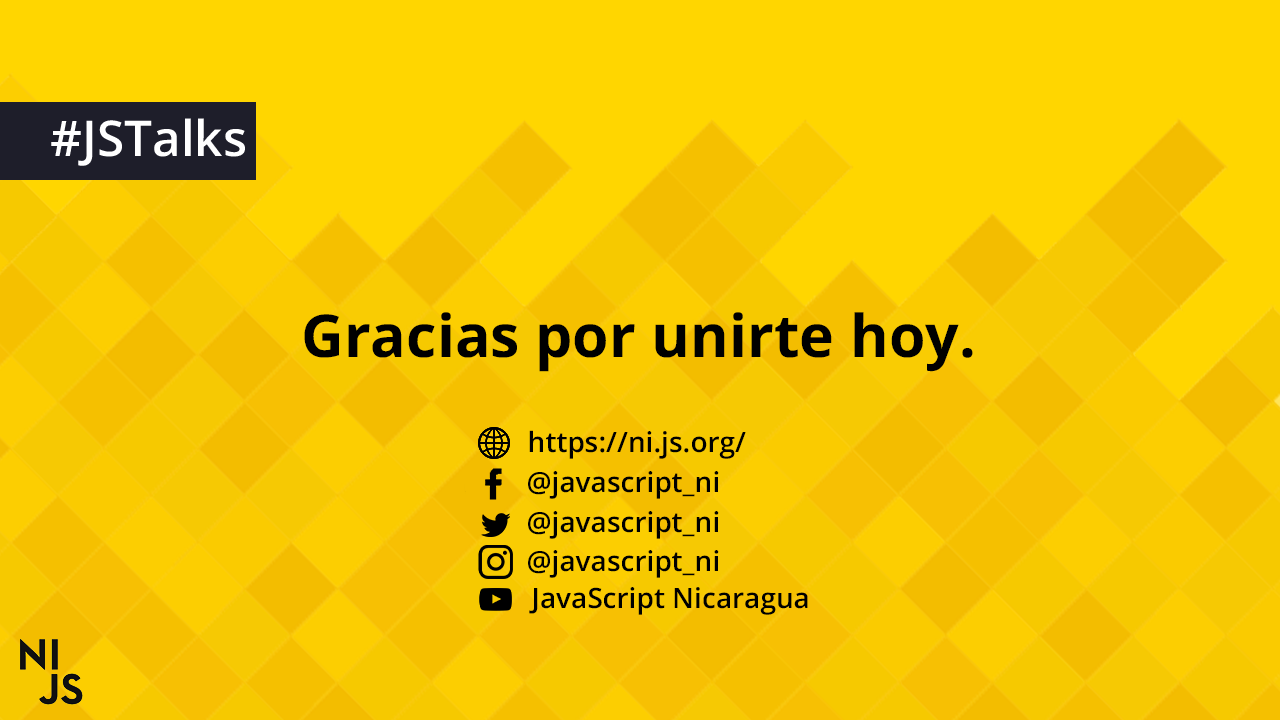
<style>
.page{position:relative;width:1280px;height:720px;background:#ffd600}
.page>*{position:absolute;margin:0}
.t1{font:49.3px "OpenSans-SemiBold";color:#ffffff}
.t2{font:59.1px "OpenSans-Bold";color:#000000}
.t3{font:28px "OpenSans-Semibold";color:#000000}
</style>
<div class="page">
<p class="t1" style="left:51px;top:118px;width:194px;height:48px">#JSTalks</p>
<p class="t2" style="left:304px;top:312px;width:669px;height:60px">Gracias por unirte hoy.</p>
<p class="t3" style="left:529px;top:430px;width:217px;height:29px">https://ni.js.org/</p>
<p class="t3" style="left:528px;top:471px;width:191px;height:28px">@javascript_ni</p>
<p class="t3" style="left:528px;top:511px;width:191px;height:28px">@javascript_ni</p>
<p class="t3" style="left:528px;top:550px;width:191px;height:28px">@javascript_ni</p>
<p class="t3" style="left:529px;top:587px;width:279px;height:28px">JavaScript Nicaragua</p>
</div>
